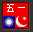
<style>
.page{position:relative;width:33px;height:32px;background:#f20000}
.page>*{position:absolute;margin:0}
.t1{font:10.4px "SimSun";color:#ffffff}
</style>
<div class="page">
<p class="t1" style="left:7px;top:4px;width:18px;height:8px">五一</p>
</div>
